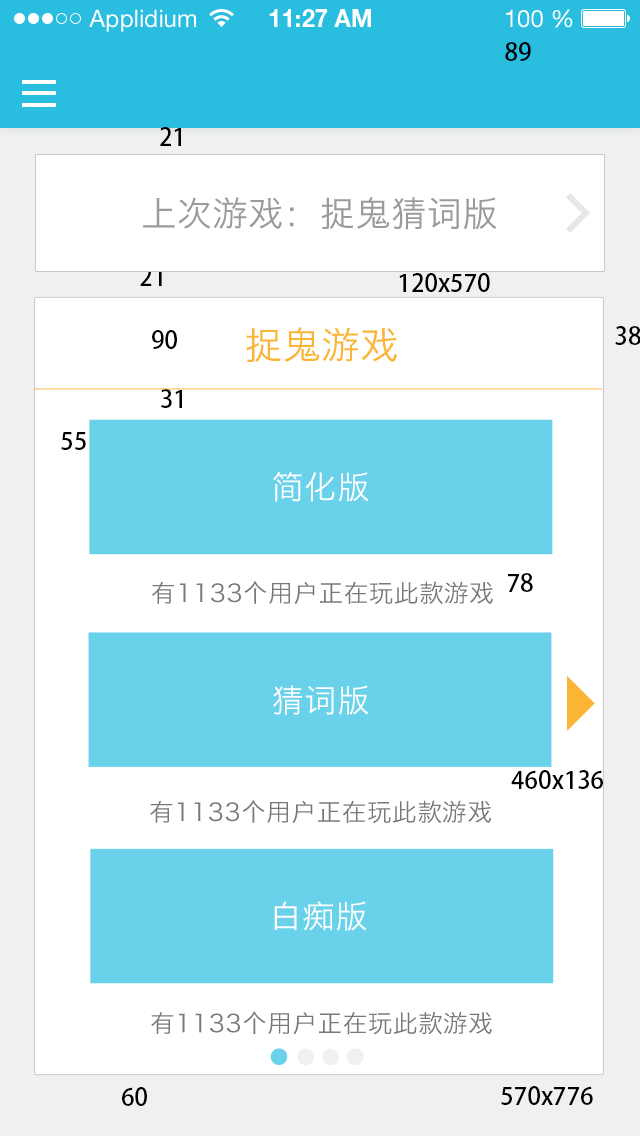
<style>
.page{position:relative;width:640px;height:1136px;background:#ffffff}
.page>*{position:absolute;margin:0}
.t1{font:24px "AdobeHeitiStd-Regular";color:#000000}
.t2{font:34.8px "HiraginoSansGB-W3";letter-spacing:0.025em;color:#9a9a9a}
.t3{font:37.7px "HiraginoSansGB-W3";letter-spacing:0.025em;color:#fbb435}
.t4{font:32.1px "HiraginoSansGB-W3";letter-spacing:0.025em;color:#ffffff}
.t5{font:24.5px "HiraginoSansGB-W3";letter-spacing:0.025em;color:#787878}
</style>
<div class="page">
<p class="t1" style="left:505px;top:42px;width:26px;height:19px">89</p>
<p class="t1" style="left:160px;top:127px;width:21px;height:19px">21</p>
<p class="t2" style="left:143px;top:197px;width:354px;height:33px">上次游戏：捉鬼猜词版</p>
<p class="t1" style="left:140px;top:267px;width:22px;height:19px">21</p>
<p class="t1" style="left:399px;top:273px;width:91px;height:19px">120x570</p>
<p class="t3" style="left:246px;top:327px;width:151px;height:35px">捉鬼游戏</p>
<p class="t1" style="left:615px;top:326px;width:26px;height:19px">38</p>
<p class="t1" style="left:152px;top:330px;width:25px;height:19px">90</p>
<p class="t1" style="left:161px;top:389px;width:21px;height:19px">31</p>
<p class="t1" style="left:61px;top:432px;width:25px;height:18px">55</p>
<p class="t4" style="left:273px;top:472px;width:96px;height:30px">简化版</p>
<p class="t5" style="left:152px;top:581px;width:341px;height:24px">有1133个用户正在玩此款游戏</p>
<p class="t1" style="left:508px;top:573px;width:25px;height:19px">78</p>
<p class="t4" style="left:273px;top:685px;width:96px;height:30px">猜词版</p>
<p class="t1" style="left:511px;top:770px;width:92px;height:19px">460x136</p>
<p class="t5" style="left:150px;top:800px;width:342px;height:24px">有1133个用户正在玩此款游戏</p>
<p class="t4" style="left:274px;top:901px;width:93px;height:30px">白痴版</p>
<p class="t5" style="left:151px;top:1011px;width:341px;height:24px">有1133个用户正在玩此款游戏</p>
<p class="t1" style="left:501px;top:1086px;width:92px;height:19px">570x776</p>
<p class="t1" style="left:122px;top:1087px;width:25px;height:19px">60</p>
</div>
